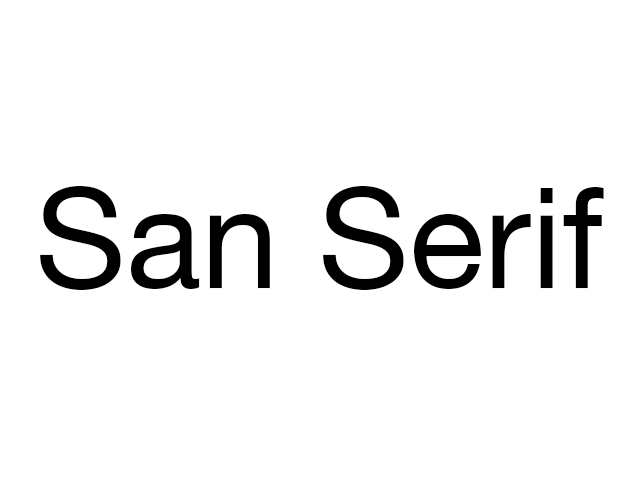
<style>
.page{position:relative;width:640px;height:480px;background:#ffffff}
.page>*{position:absolute;margin:0}
.t1{font:140px "HelveticaNeue";color:#000000}
</style>
<div class="page">
<p class="t1" style="left:40px;top:186px;width:564px;height:104px">San Serif</p>
</div>
